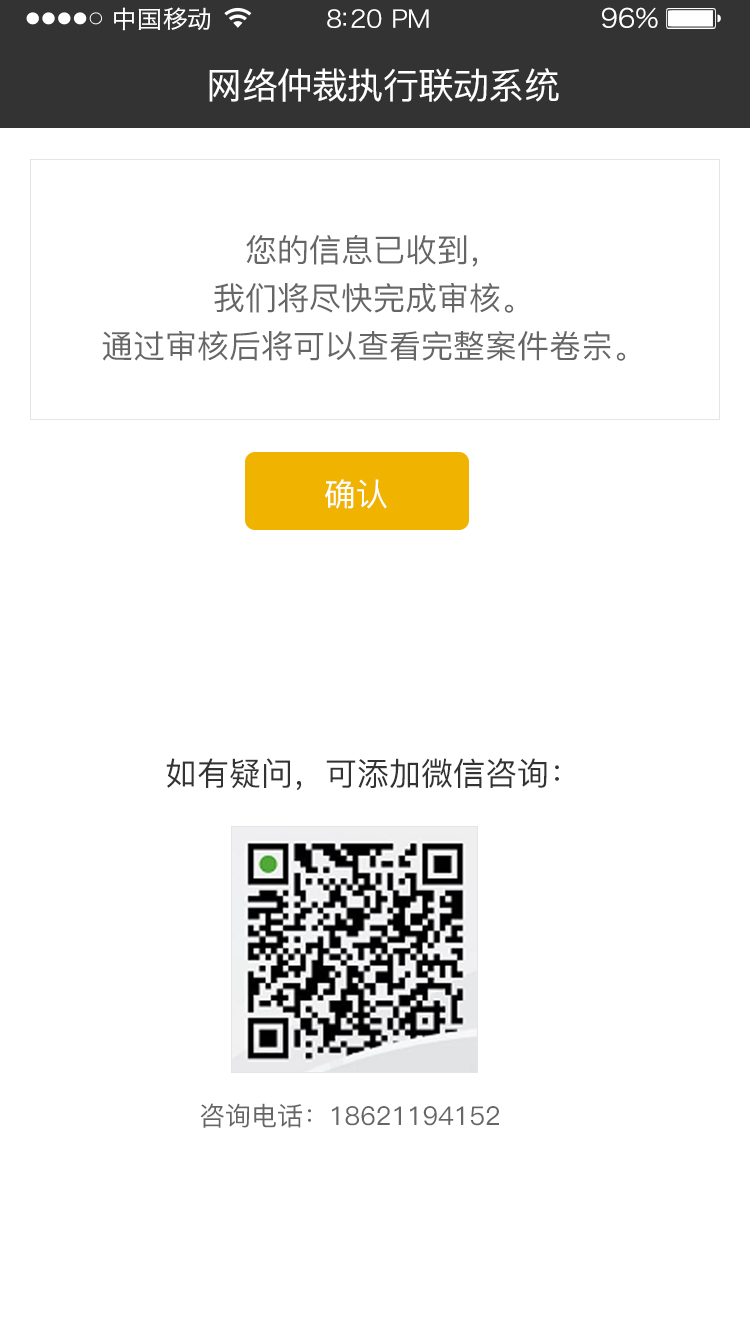
<style>
.page{position:relative;width:750px;height:1334px;background:#ffffff}
.page>*{position:absolute;margin:0}
.t1{font:24px "HiraginoSansGB-W3";letter-spacing:0.02em;color:#ffffff;scale:1.03 1}
.t2{font:24px "HiraginoSansGB-W3";letter-spacing:-0.02em;color:#ffffff;scale:1.03 1}
.t3{font:26.2px "HiraginoSansGB-W3";letter-spacing:-0.02em;color:#ffffff;scale:1.03 1}
.t4{font:36px "PingFang-SC-Medium";letter-spacing:-0.02em;color:#ffffff}
.t5{font:32px/48px "PingFang-SC-Medium";color:#666666}
.t6{font:32px "PingFang-SC-Medium";color:#ffffff}
.t7{font:32px "PingFang-SC-Medium";color:#333333}
.t8{font:26px "PingFang-SC-Medium";color:#666666}
</style>
<div class="page">
<p class="t1" style="left:114px;top:7px;width:97px;height:24px">中国移动</p>
<p class="t2" style="left:327px;top:9px;width:102px;height:19px">8:20 PM</p>
<p class="t3" style="left:602px;top:7px;width:56px;height:22px">96%</p>
<p class="t4" style="left:209px;top:68px;width:350px;height:34px">网络仲裁执行联动系统</p>
<p class="t5" style="left:102px;top:234px;width:524px;height:127px;text-align:center">您的信息已收到，<br>我们将尽快完成审核。<br>通过审核后将可以查看完整案件卷宗。</p>
<p class="t6" style="left:325px;top:479px;width:62px;height:30px">确认</p>
<p class="t7" style="left:166px;top:758px;width:393px;height:33px">如有疑问，可添加微信咨询：</p>
<p class="t8" style="left:200px;top:1103px;width:299px;height:25px">咨询电话：18621194152</p>
</div>
